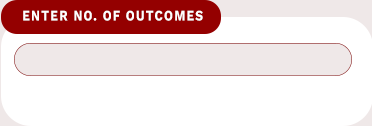
<style>
.page{position:relative;width:372px;height:126px;background:#ffffff}
.page>*{position:absolute;margin:0}
.t1{font:14.7px "WorkSansRoman-Bold";letter-spacing:0.1em;color:#ffffff;scale:0.82 1}
</style>
<div class="page">
<p class="t1" style="left:23px;top:10px;width:180px;height:11px">ENTER NO. OF OUTCOMES</p>
</div>
